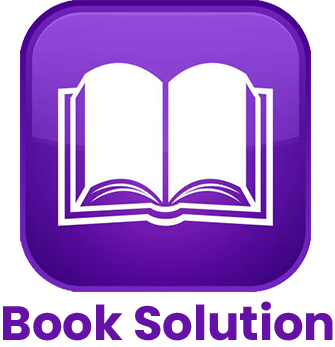
<style>
.page{position:relative;width:335px;height:347px;background:#ffffff}
.page>*{position:absolute;margin:0}
.t1{font:48px "Poppins-Bold";color:#6511a5}
</style>
<div class="page">
<p class="t1" style="left:3px;top:301px;width:330px;height:40px">Book Solution</p>
</div>
